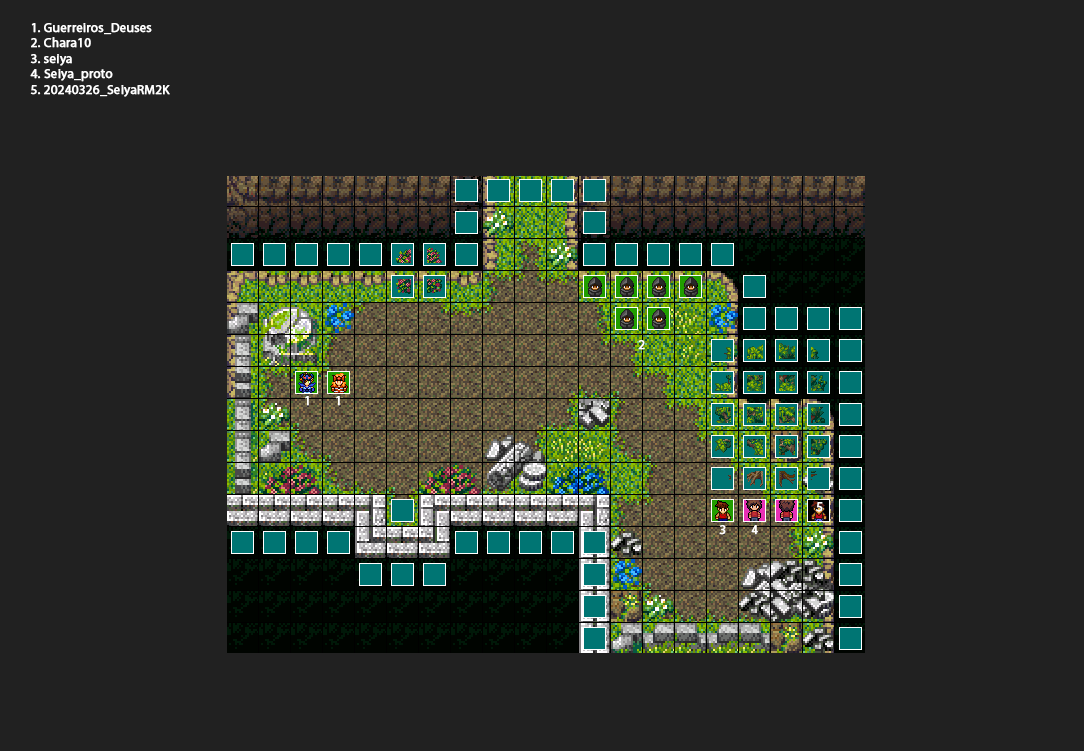
<style>
.page{position:relative;width:1084px;height:751px;background:#212121}
.page>*{position:absolute;margin:0}
.t1{font:13px "MyriadPro-Regular";color:#ffffff;font-weight:bold}
</style>
<div class="page">
<p class="t1" style="left:30px;top:23px;width:140px;height:74px">1. Guerreiros_Deuses<br>2. Chara10<br>3. seiya<br>4. Seiya_proto<br>5. 20240326_SeiyaRM2K</p>
<p class="t1" style="left:638px;top:340px;width:7px;height:10px">2</p>
<p class="t1" style="left:305px;top:396px;width:4px;height:10px">1</p>
<p class="t1" style="left:336px;top:396px;width:4px;height:10px">1</p>
<p class="t1" style="left:816px;top:502px;width:7px;height:10px">5</p>
<p class="t1" style="left:719px;top:525px;width:7px;height:10px">3</p>
<p class="t1" style="left:751px;top:525px;width:7px;height:10px">4</p>
</div>
